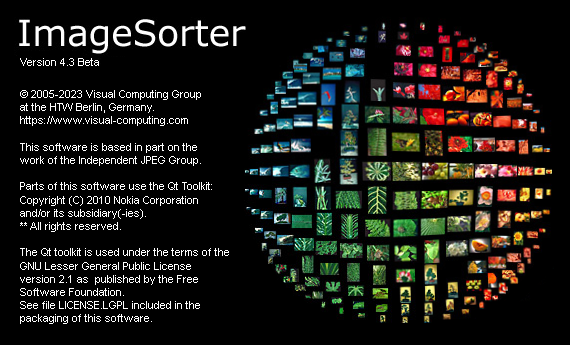
<style>
.page{position:relative;width:570px;height:345px;background:#000000}
.page>*{position:absolute;margin:0}
.t1{font:11px "ArialMT";color:#ffffff}
</style>
<div class="page">
<p class="t1" style="left:20px;top:58px;width:79px;height:8px">Version 4.3 Beta</p>
<p class="t1" style="left:20px;top:90px;width:209px;height:234px">© 2005-2023 Visual Computing Group<br>at the HTW Berlin, Germany.<br>https://www.visual-computing.com<br><br>This software is based in part on the <br>work of the Independent JPEG Group.<br><br>Parts of this software use the Qt Toolkit:<br>Copyright (C) 2010 Nokia Corporation <br>and/or its subsidiary(-ies).<br>** All rights reserved.<br><br>The Qt toolkit is used under the terms of the <br>GNU Lesser General Public License <br>version 2.1 as  published by the Free <br>Software Foundation. <br>See file LICENSE.LGPL included in the <br>packaging of this software.</p>
</div>
